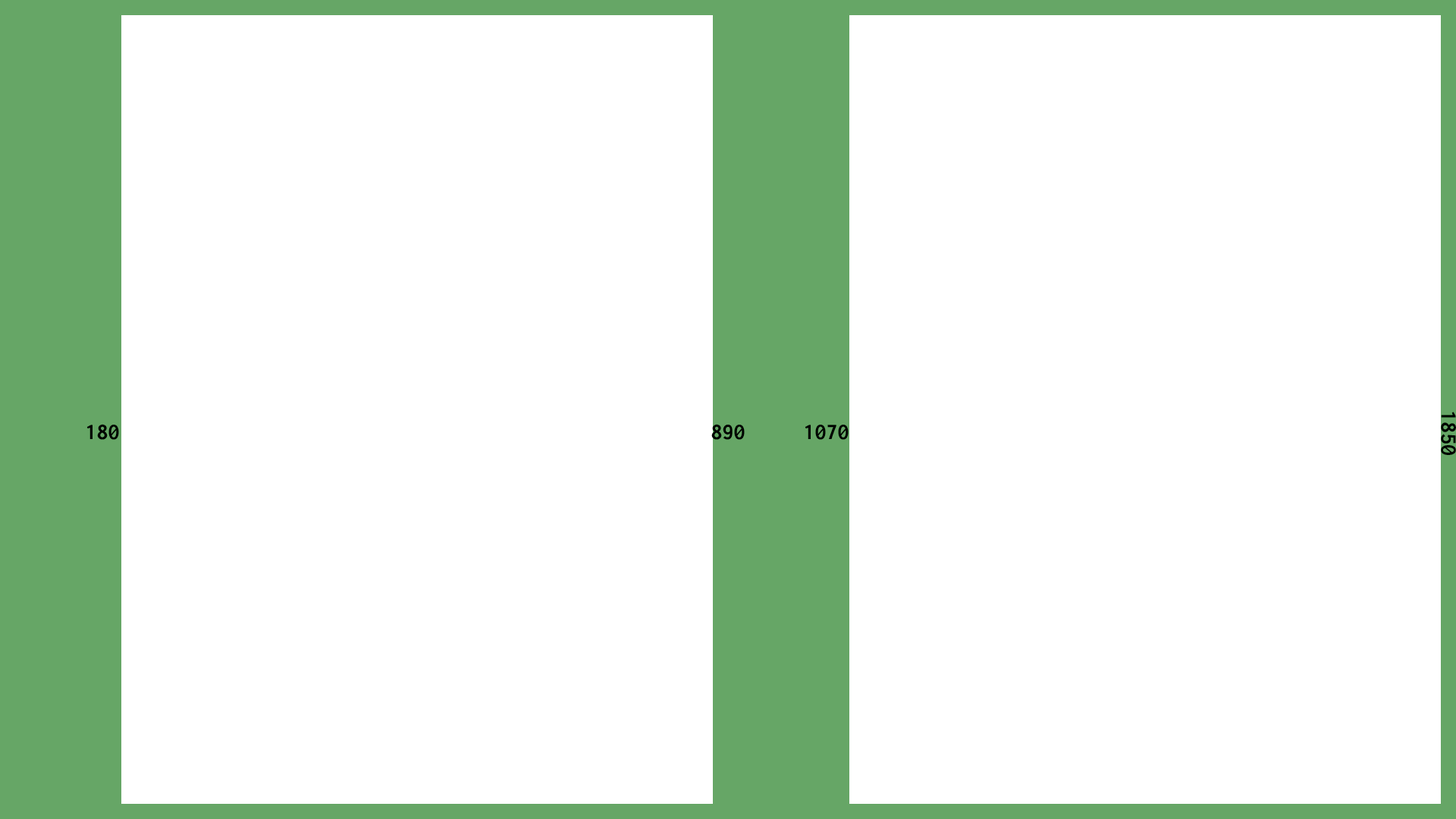
<style>
.page{position:relative;width:1456px;height:819px;background:#ffffff}
.page>*{position:absolute;margin:0}
.t1{font:22.7px "RictyDiminished-Bold";color:#000000}
</style>
<div class="page">
<p class="t1" style="left:1441px;top:412px;width:15px;height:43px;rotate:90deg">1850</p>
<p class="t1" style="left:86px;top:424px;width:33px;height:16px">180</p>
<p class="t1" style="left:711px;top:424px;width:34px;height:16px">890</p>
<p class="t1" style="left:805px;top:425px;width:44px;height:15px">1070</p>
</div>
